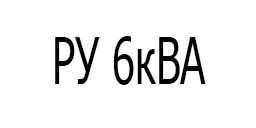
<style>
.page{position:relative;width:256px;height:128px;background:#ffffff}
.page>*{position:absolute;margin:0}
.t1{font:64.9px "Tahoma";color:#000000;scale:0.64 1}
</style>
<div class="page">
<p class="t1" style="left:55px;top:36px;width:151px;height:49px">РУ 6кВА</p>
</div>
